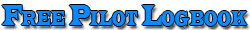
<style>
.page{position:relative;width:250px;height:30px;background:#ffffff}
.page>*{position:absolute;margin:0}
.t1{font:30px "LatinWide";color:#0084ff;font-variant:small-caps;scale:0.48 1}
</style>
<div class="page">
<p class="t1" style="left:2px;top:5px;width:245px;height:21px">Free Pilot Logbook</p>
</div>
